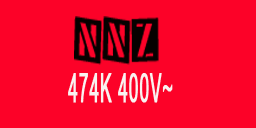
<style>
.page{position:relative;width:256px;height:128px;background:#fc0228}
.page>*{position:absolute;margin:0}
.t1{font:51.5px "Tinsnips";letter-spacing:0.02em;color:#060100;font-weight:bold;scale:0.4 1}
.t2{font:40.3px "ArialNarrow";letter-spacing:0.02em;color:#f9f2f0;font-weight:bold;scale:0.52 1}
</style>
<div class="page">
<p class="t1" style="left:74px;top:16px;width:85px;height:49px">NNZ</p>
<p class="t2" style="left:68px;top:73px;width:105px;height:30px">474K 400V~</p>
</div>
